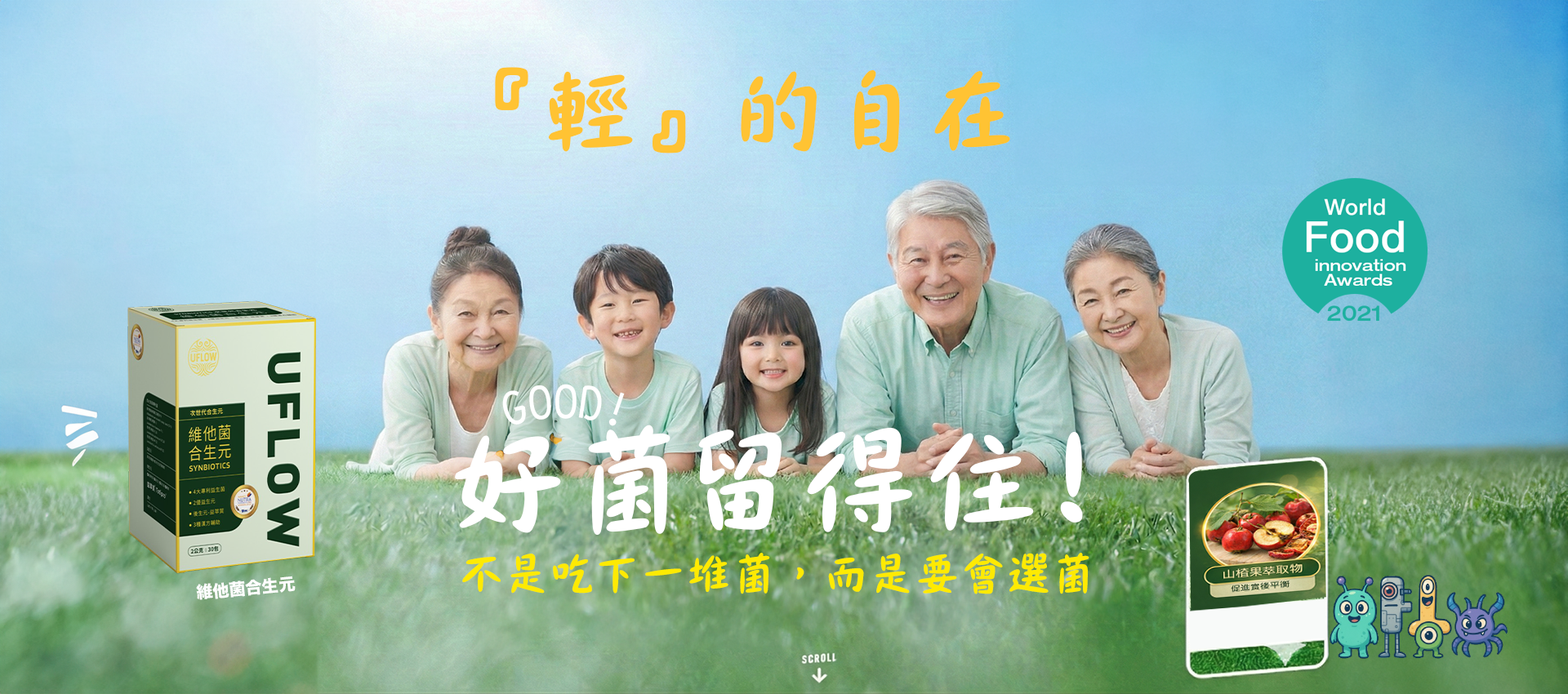
<style>
.page{position:relative;width:1568px;height:694px}
.page>*{position:absolute;margin:0}
.t1{font:95.2px "DFBnagBang-W5-WIN-BF";color:#ffc333}
.t2{font:47.6px "DFPiPi-W5-WIN-BF";color:#ffffff}
.t3{font:121.9px "DFBnagBang-W5-WIN-BF";color:#ffffff}
.t4{font:121.1px "DFBnagBang-W5-WIN-BF";color:#ffffff}
.t5{font:45.6px "DFBnagBang-W5-WIN-BF";color:#feea02}
.t6{font:16.6px "HiraKakuStd-W8";color:#fefefe}
</style>
<div class="page">
<p class="t1" style="left:495px;top:67px;width:515px;height:87px">『輕』的自在</p>
<p class="t2" style="left:502px;top:384px;width:123px;height:42px">GOOD!</p>
<p class="t3" style="left:455px;top:425px;width:215px;height:111px">好菌</p>
<p class="t4" style="left:698px;top:427px;width:385px;height:105px">留得住!</p>
<p class="t5" style="left:462px;top:553px;width:627px;height:42px">不是吃下一堆菌，而是要會選菌</p>
<p class="t6" style="left:196px;top:576px;width:100px;height:24px;rotate:-5deg">維他菌合生元</p>
</div>
